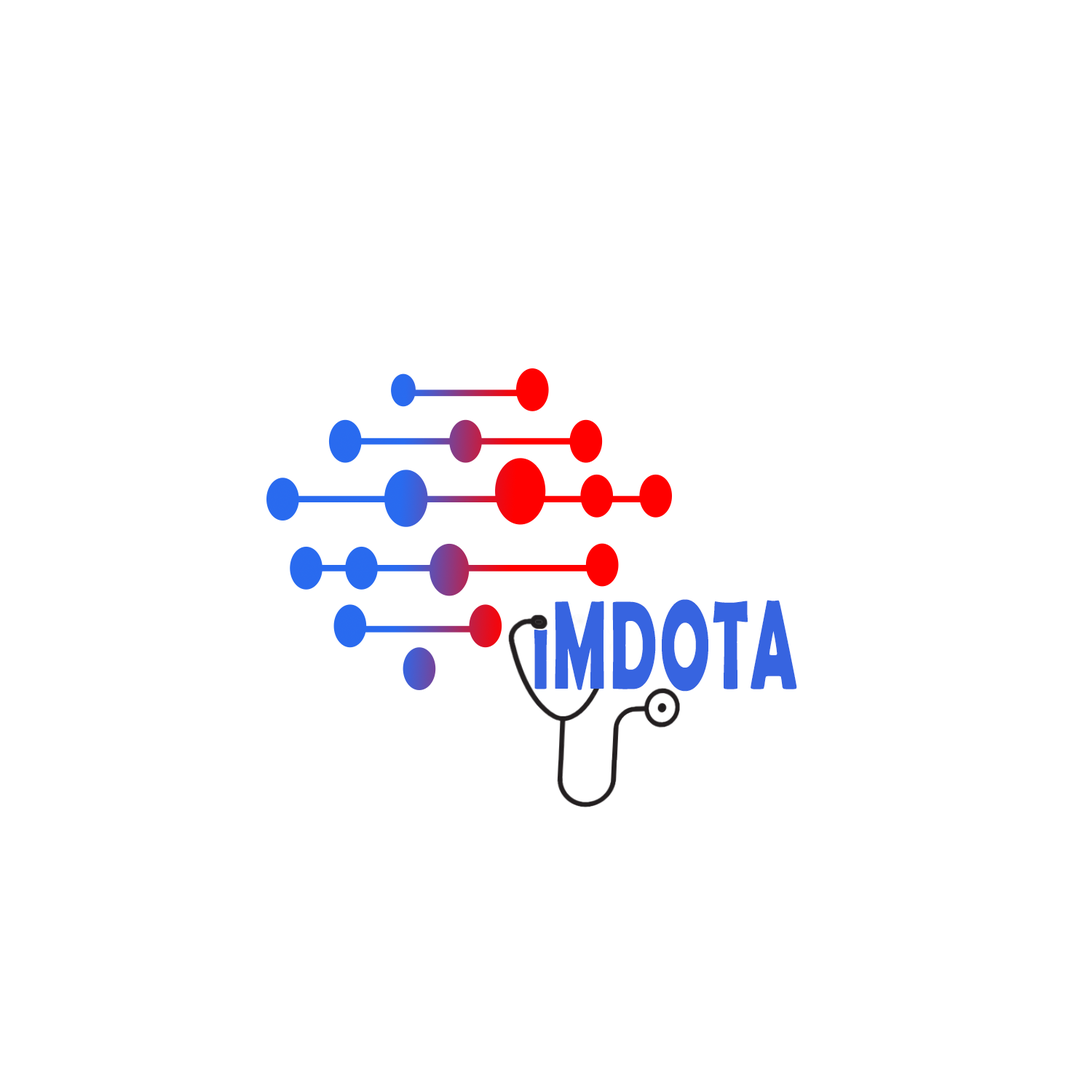
<style>
.page{position:relative;width:1092px;height:1092px;background:#ffffff}
.page>*{position:absolute;margin:0}
.t1{font:126.8px "BerlinSansFBDemi-Bold";letter-spacing:0.04em;color:#3764e0;scale:0.53 1}
</style>
<div class="page">
<p class="t1" style="left:534px;top:599px;width:263px;height:93px">iMDOTA</p>
</div>
